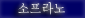
<style>
.page{position:relative;width:85px;height:18px}
.page>*{position:absolute;margin:0}
.t1{font:13.2px "BatangChe";scale:0.91 1}
</style>
<div class="page">
<p class="t1" style="left:18px;top:2px;width:47px;height:13px">소프라노</p>
</div>
